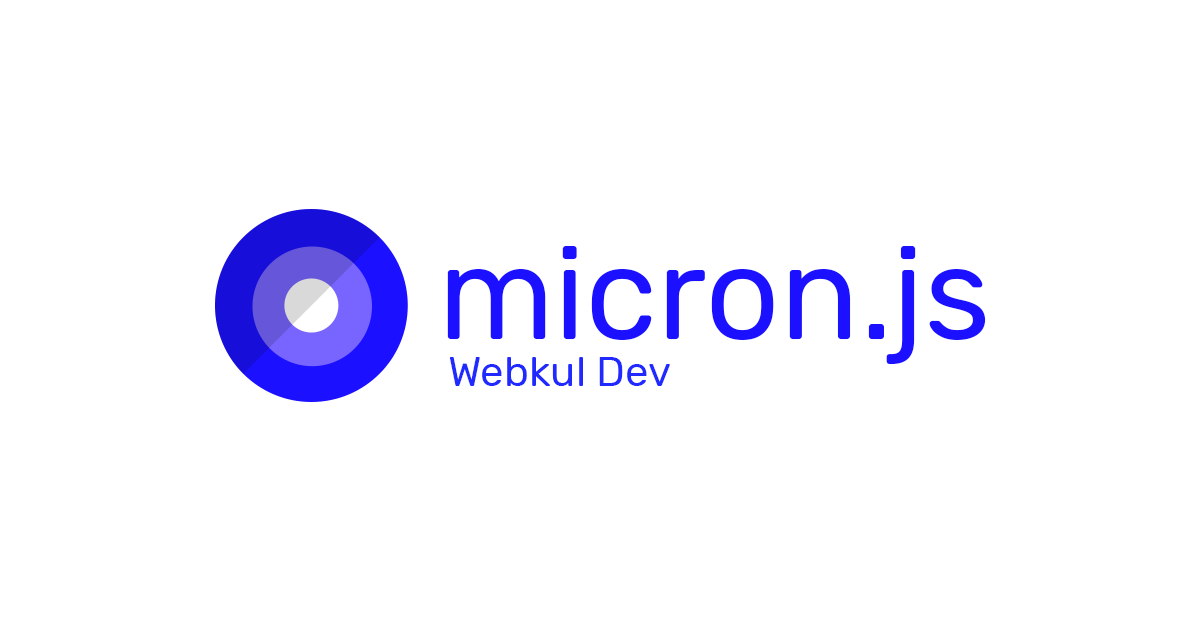
<style>
.page{position:relative;width:1200px;height:630px;background:#ffffff}
.page>*{position:absolute;margin:0}
.t1{font:131.2px "Rubik-Regular";color:#1b10ff}
.t2{font:42px "Rubik-Regular";color:#202aff}
</style>
<div class="page">
<p class="t1" style="left:447px;top:246px;width:539px;height:118px">micron.js</p>
<p class="t2" style="left:449px;top:357px;width:221px;height:29px">Webkul Dev</p>
</div>
